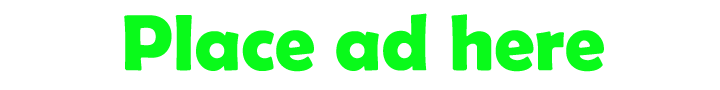
<style>
.page{position:relative;width:720px;height:90px;background:#ffffff}
.page>*{position:absolute;margin:0}
.t1{font:79.9px "BerlinSansFBDemi-Bold";color:#09fa1a}
</style>
<div class="page">
<p class="t1" style="left:124px;top:13px;width:480px;height:59px">Place ad here</p>
</div>
